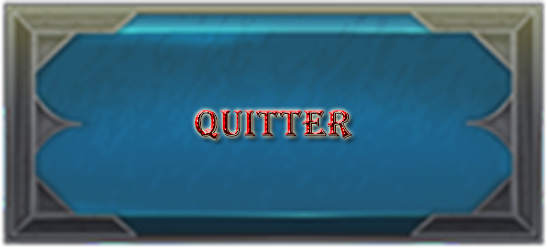
<style>
.page{position:relative;width:547px;height:250px}
.page>*{position:absolute;margin:0}
.t1{font:38px "Algerian";font-weight:bold}
</style>
<div class="page">
<p class="t1" style="left:195px;top:110px;width:158px;height:30px">QUITTER</p>
</div>
